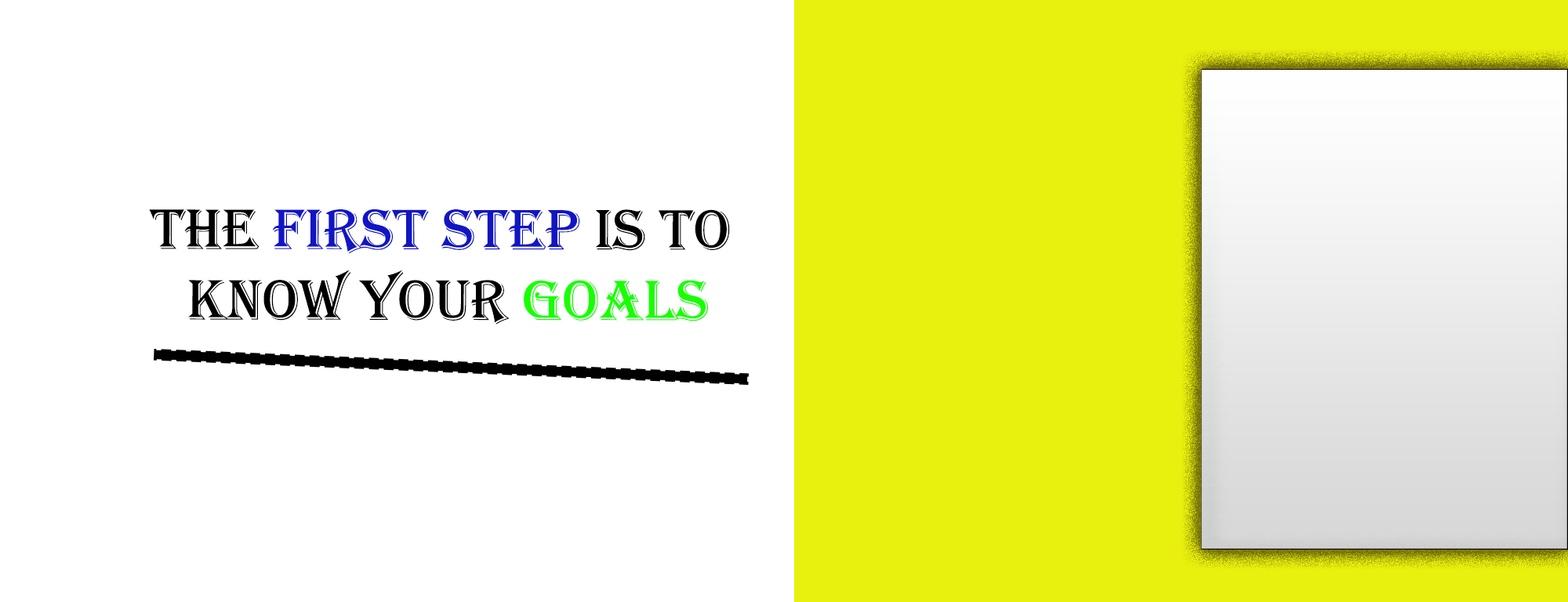
<style>
.page{position:relative;width:1568px;height:602px;background:#ffffff}
.page>*{position:absolute;margin:0}
.t1{font:58.8px "Algerian";color:#000000}
.t2{font:58.8px "Algerian";color:#1115c4}
.t3{font:58.8px "Algerian";color:#18ff00}
</style>
<div class="page">
<p class="t1" style="left:149px;top:209px;width:581px;height:116px;text-align:center">The <span class="t2">first Step</span> is to<br> know your <span class="t3">goals</span></p>
</div>
